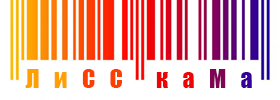
<style>
.page{position:relative;width:280px;height:100px;background:#ffffff}
.page>*{position:absolute;margin:0}
.t1{font:24px "Impact";letter-spacing:0.6em;color:#ffa000}
.t2{font:24px "Impact";letter-spacing:0.6em;color:#fd3e01}
.t3{font:24px "Impact";letter-spacing:0.6em;color:#ef0406}
.t4{font:24px "Impact";letter-spacing:0.6em;color:#7e0454}
.t5{font:24px "Impact";letter-spacing:0.6em;color:#360098}
</style>
<div class="page">
<p class="t1" style="left:25px;top:69px;width:227px;height:19px">Ли<span class="t2">СС </span><span class="t3">ка</span><span class="t4">М</span><span class="t5">а</span></p>
</div>
